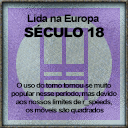
<style>
.page{position:relative;width:128px;height:128px}
.page>*{position:absolute;margin:0}
.t1{font:10.5px "Arial-BoldMT";letter-spacing:-0.06em;color:#000000;scale:1.07 1}
.t2{font:13.2px "Arial-Black";letter-spacing:-0.06em;color:#000000;text-transform:uppercase;scale:1.07 1}
.t3{font:6.8px "Arial-BoldMT";letter-spacing:-0.08em;color:#000000;scale:1.09 1}
</style>
<div class="page">
<p class="t1" style="left:27px;top:14px;width:72px;height:10px">Lida na Europa</p>
<p class="t2" style="left:24px;top:24px;width:80px;height:14px">século 18</p>
<p class="t3" style="left:11px;top:82px;width:106px;height:32px;text-align:center">O uso do torno tornou-se muito <br>popular nesse período, mas devido <br>aos nossos limites de r_speeds, <br>os móveis são quadrados</p>
</div>
